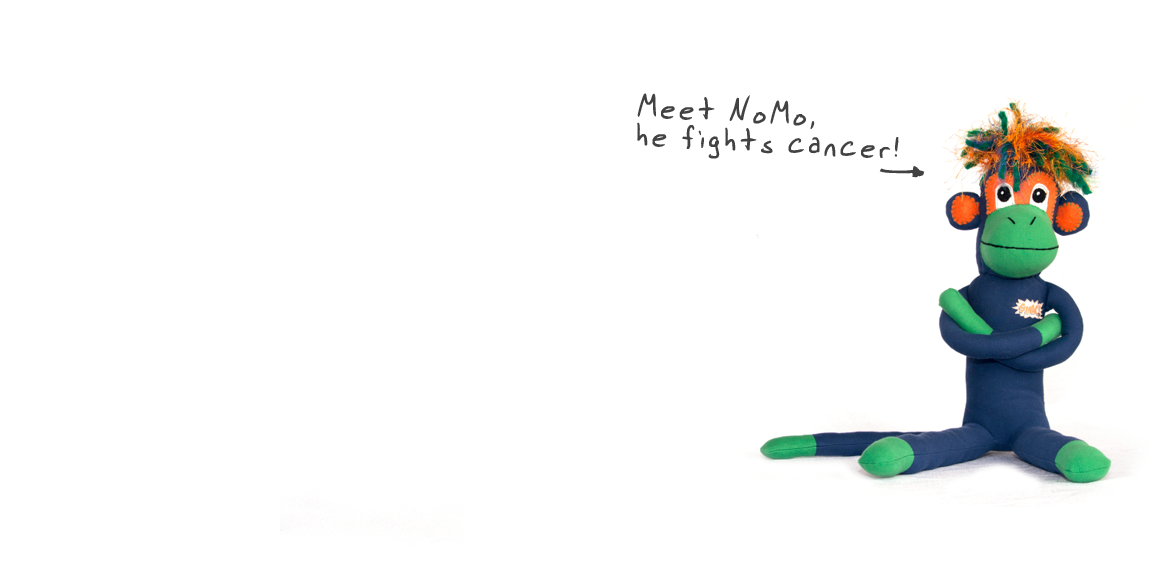
<style>
.page{position:relative;width:1152px;height:579px;background:#ffffff}
.page>*{position:absolute;margin:0}
.t1{font:24px "Kuhltom2";letter-spacing:0.05em;color:#424242}
.t2{font:48px "Kuhlarrows";letter-spacing:0.05em;color:#424242}
</style>
<div class="page">
<p class="t1" style="left:637px;top:93px;width:262px;height:66px;rotate:3deg">Meet NoMo,<br>he fights cancer!</p>
<p class="t2" style="left:879px;top:166px;width:46px;height:12px;rotate:-90deg">y</p>
</div>
